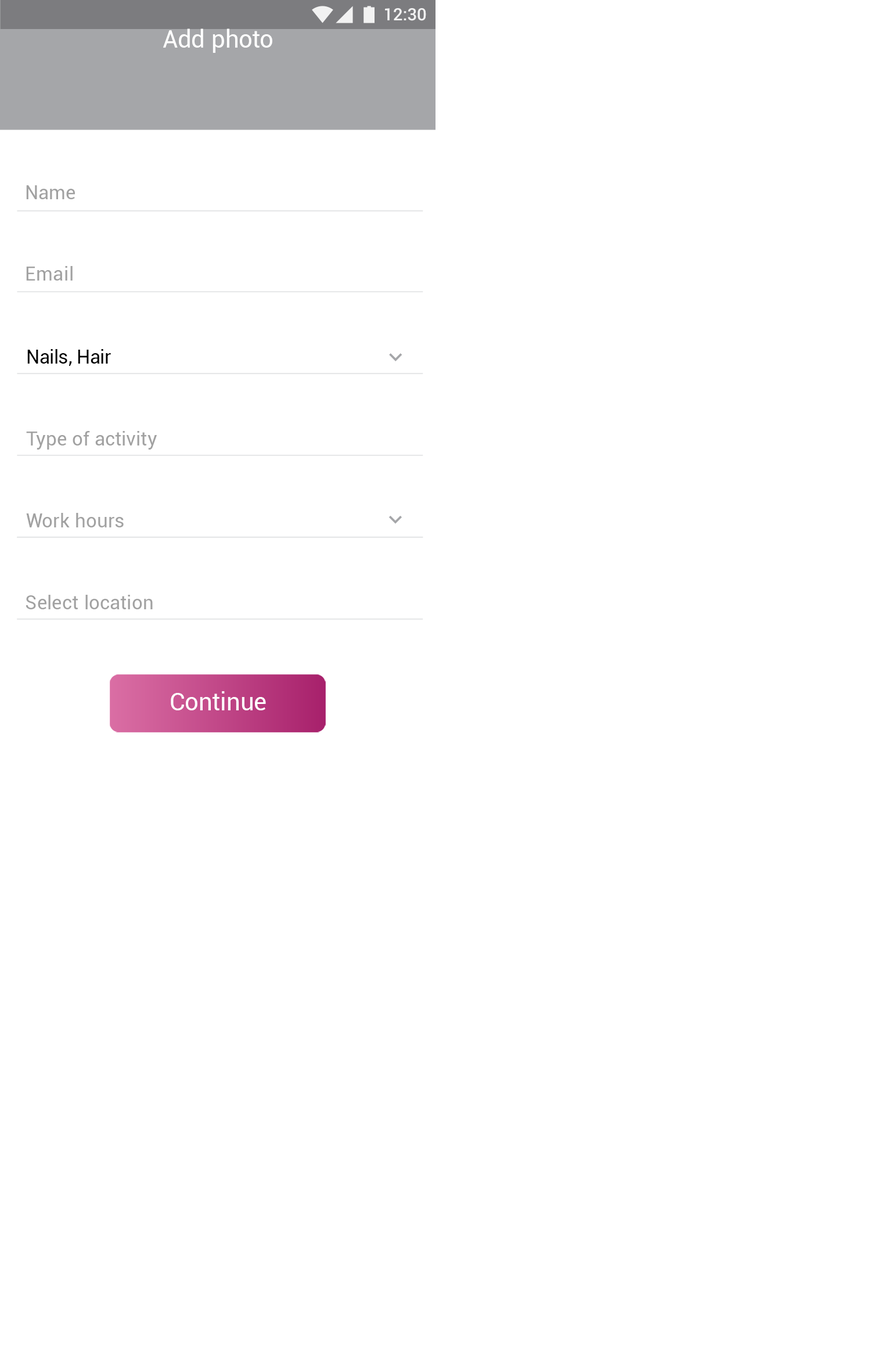
<style>
.page{position:relative;width:871px;height:1369px;background:#ffffff}
.page>*{position:absolute;margin:0}
.t1{font:16.9px "Roboto-Medium";color:#ffffff}
.t2{font:24.2px "Roboto-Regular";letter-spacing:0.01em;color:#ffffff}
.t3{font:19.4px "Roboto-Regular";letter-spacing:0.01em;color:#a1a1a1}
.t4{font:19.4px "Roboto-Regular";letter-spacing:-0.005em;color:#000000}
.t5{font:19.3px "Roboto-Regular";letter-spacing:0.01em;color:#a1a1a1}
.t6{font:24.2px "Roboto-Regular";color:#ffffff}
</style>
<div class="page">
<p class="t1" style="left:385px;top:8px;width:41px;height:13px">12:30</p>
<p class="t2" style="left:163px;top:28px;width:109px;height:25px">Add photo</p>
<p class="t3" style="left:26px;top:185px;width:49px;height:14px">Name</p>
<p class="t3" style="left:26px;top:266px;width:47px;height:15px">Email</p>
<p class="t4" style="left:27px;top:349px;width:84px;height:17px">Nails, Hair</p>
<p class="t3" style="left:26px;top:431px;width:131px;height:19px">Type of activity</p>
<p class="t5" style="left:26px;top:513px;width:98px;height:14px">Work hours</p>
<p class="t5" style="left:26px;top:595px;width:127px;height:14px">Select location</p>
<p class="t6" style="left:171px;top:691px;width:95px;height:19px">Continue</p>
</div>
